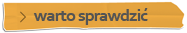
<style>
.page{position:relative;width:187px;height:33px}
.page>*{position:absolute;margin:0}
.t1{font:18px "Corbel-Bold";letter-spacing:-0.05em;color:#545454}
</style>
<div class="page">
<p class="t1" style="left:33px;top:8px;width:115px;height:17px">warto sprawdzić</p>
</div>
